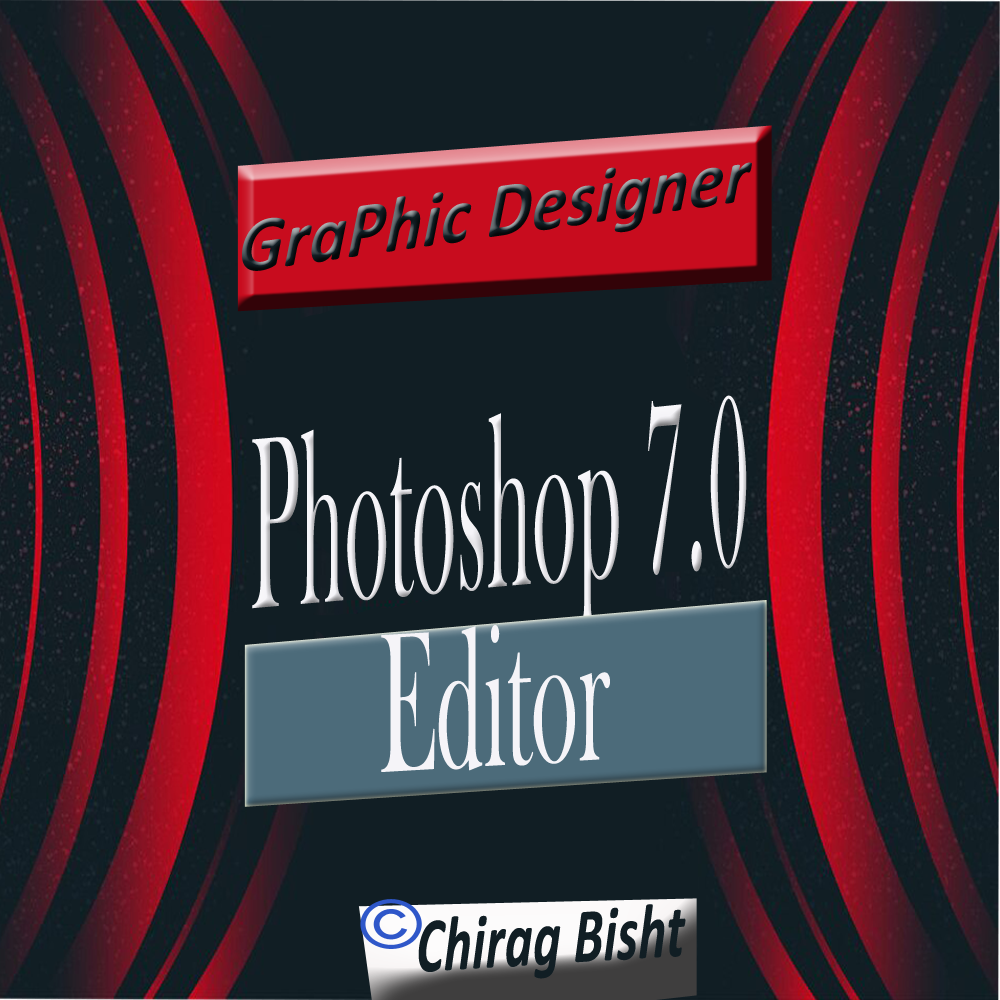
<style>
.page{position:relative;width:1000px;height:1000px;background:#111e24}
.page>*{position:absolute;margin:0}
.t1{font:78.5px "Calibri-BoldItalic";letter-spacing:0.01em;scale:0.9 1}
.t2{font:252.8px "BaskOldFace";letter-spacing:0.01em;color:#f5f4f8;scale:0.34 1}
.t3{font:205.2px "BaskOldFace";letter-spacing:0.01em;color:#f5f4f8;scale:0.44 1}
.t4{font:78.4px "Calibri-BoldItalic";letter-spacing:0.01em;color:#111e24;scale:0.67 1}
</style>
<div class="page">
<p class="t1" style="left:242px;top:162px;width:510px;height:109px;rotate:-8deg">GraPhic Designer</p>
<p class="t2" style="left:252px;top:395px;width:495px;height:232px;rotate:-5deg">Photoshop 7.0</p>
<p class="t3" style="left:381px;top:625px;width:229px;height:147px;rotate:-3deg">Editor</p>
<p class="t4" style="left:418px;top:904px;width:268px;height:75px;rotate:-4deg">Chirag Bisht</p>
</div>
